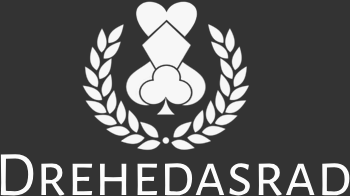
<style>
.page{position:relative;width:350px;height:196px;background:#333333}
.page>*{position:absolute;margin:0}
.t1{font:63px "AlegreyaSansSC-Regular";color:#fcfcfc}
</style>
<div class="page">
<p class="t1" style="left:0px;top:154px;width:350px;height:42px">Drehedasrad</p>
</div>
